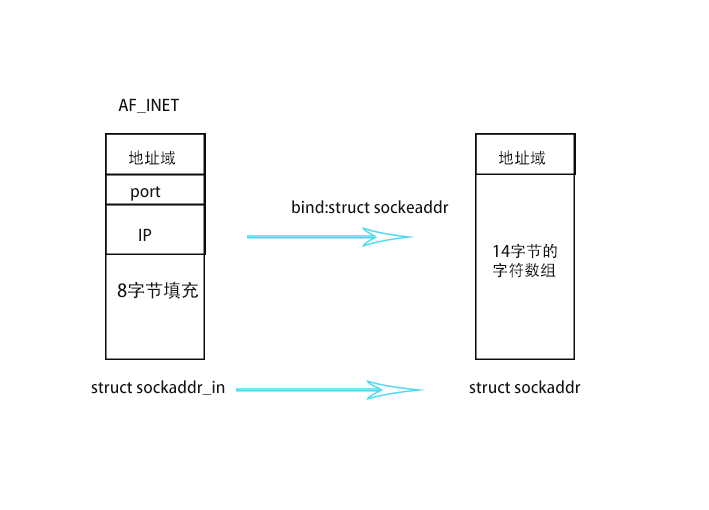
<style>
.page{position:relative;width:709px;height:510px;background:#ffffff}
.page>*{position:absolute;margin:0}
.t1{font:16px "AdobeHeitiStd-Regular";color:#141212}
.t2{font:18px "AdobeHeitiStd-Regular";color:#141212}
</style>
<div class="page">
<p class="t1" style="left:118px;top:98px;width:61px;height:15px">AF_INET</p>
<p class="t1" style="left:129px;top:150px;width:47px;height:15px">地址域</p>
<p class="t1" style="left:499px;top:150px;width:47px;height:15px">地址域</p>
<p class="t1" style="left:131px;top:186px;width:30px;height:15px">port</p>
<p class="t1" style="left:292px;top:200px;width:157px;height:14px">bind:struct sockeaddr</p>
<p class="t1" style="left:139px;top:228px;width:13px;height:13px">IP</p>
<p class="t1" style="left:493px;top:243px;width:64px;height:35px">14字节的<br>字符数组</p>
<p class="t2" style="left:117px;top:281px;width:82px;height:18px">8字节填充</p>
<p class="t1" style="left:91px;top:380px;width:134px;height:15px">struct sockaddr_in</p>
<p class="t1" style="left:469px;top:380px;width:112px;height:14px">struct sockaddr</p>
</div>
